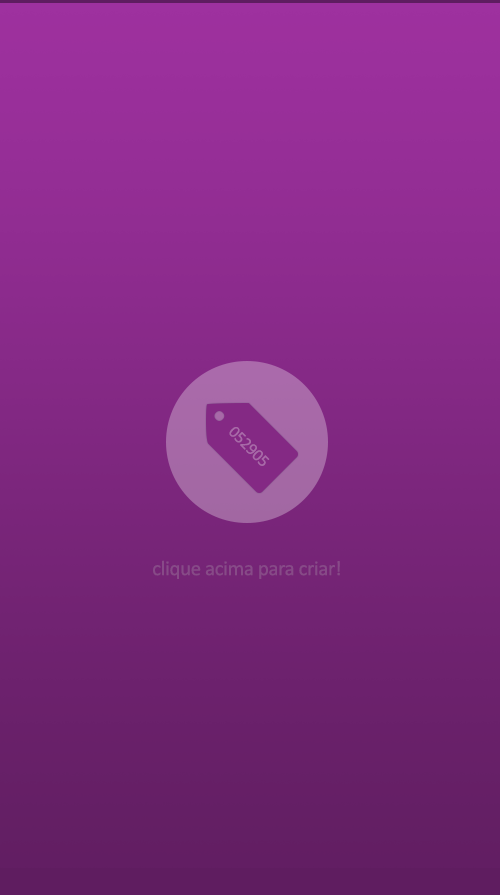
<style>
.page{position:relative;width:500px;height:895px}
.page>*{position:absolute;margin:0}
.t1{font:16.9px "Calibri";letter-spacing:-0.02em;color:#a869a8}
.t2{font:21px "Calibri";letter-spacing:-0.02em;color:#874a88}
</style>
<div class="page">
<p class="t1" style="left:229px;top:427px;width:41px;height:39px;rotate:45deg">052905</p>
<p class="t2" style="left:153px;top:560px;width:187px;height:19px">clique acima para criar!</p>
</div>
